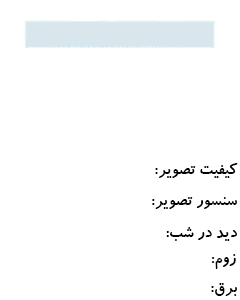
<style>
.page{position:relative;width:240px;height:300px;background:#ffffff}
.page>*{position:absolute;margin:0}
.t1{font:17.6px "BKoodakBold";color:#000000}
</style>
<div class="page">
<p class="t1" style="left:155px;top:163px;width:83px;height:15px">کیفیت تصویر:</p>
<p class="t1" style="left:152px;top:197px;width:85px;height:12px">سنسور تصویر:</p>
<p class="t1" style="left:166px;top:227px;width:72px;height:14px">دید در شب:</p>
<p class="t1" style="left:212px;top:254px;width:24px;height:15px">زوم:</p>
<p class="t1" style="left:211px;top:283px;width:26px;height:13px">برق:</p>
</div>
